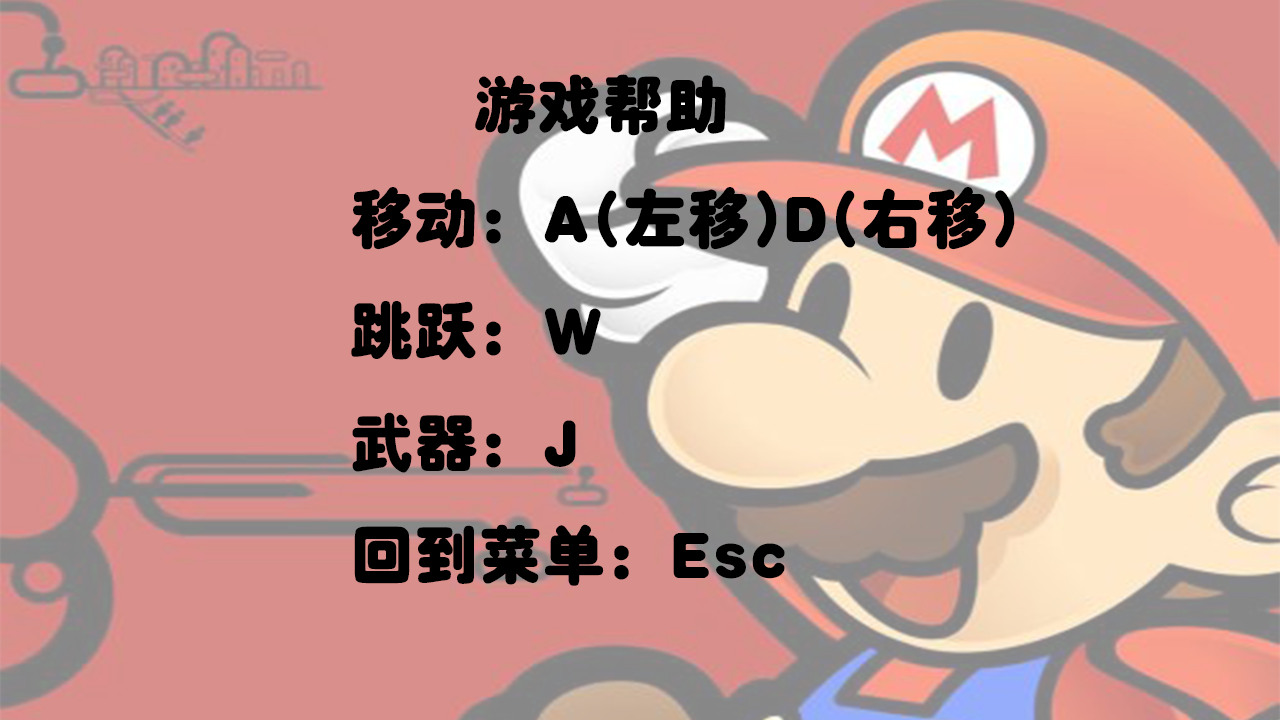
<style>
.page{position:relative;width:1280px;height:720px;background:#d98f8b}
.page>*{position:absolute;margin:0}
.t1{font:64px "HYe0gj";color:#000000}
</style>
<div class="page">
<p class="t1" style="left:475px;top:74px;width:251px;height:62px">游戏帮助</p>
<p class="t1" style="left:351px;top:187px;width:664px;height:399px">移动：A(左移)D(右移)<br>跳跃：W<br>武器：J<br>回到菜单：Esc</p>
</div>
